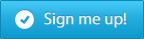
<style>
.page{position:relative;width:144px;height:39px}
.page>*{position:absolute;margin:0}
.t1{font:16.7px "MyriadPro-Regular";letter-spacing:-0.025em;color:#e9e9e9;font-weight:bold}
</style>
<div class="page">
<p class="t1" style="left:44px;top:12px;width:83px;height:16px">Sign me up!</p>
</div>
